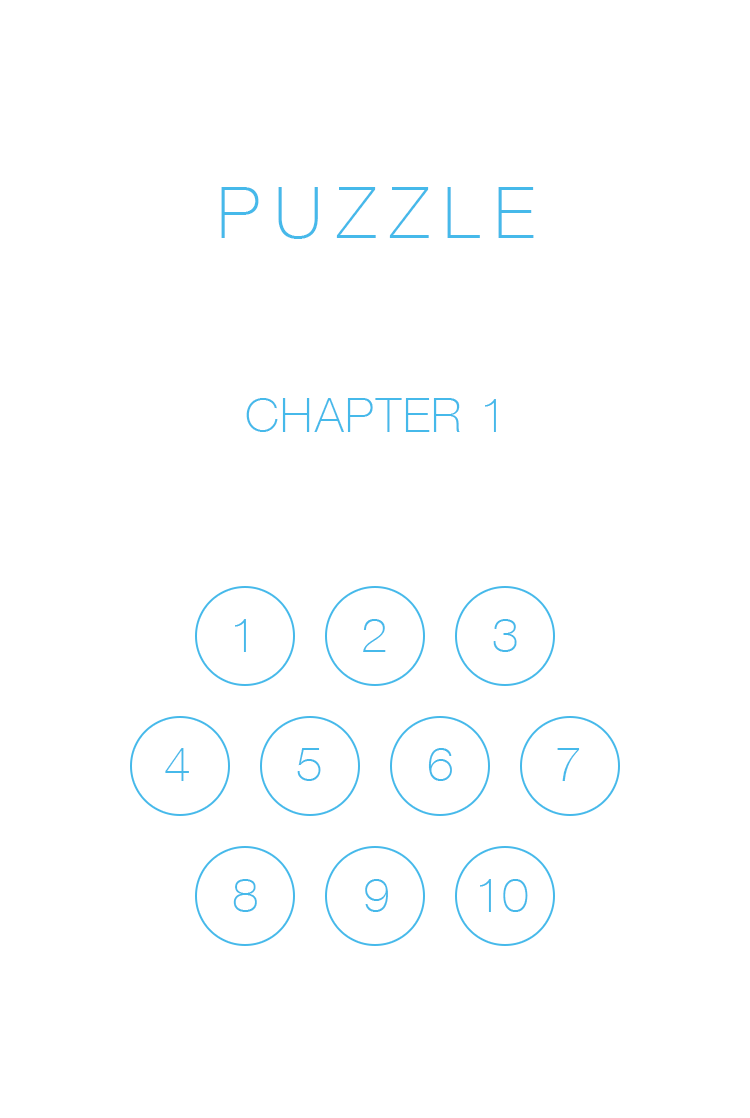
<style>
.page{position:relative;width:750px;height:1118px;background:#ffffff}
.page>*{position:absolute;margin:0}
.t1{font:72px "HelveticaNeue-Thin";letter-spacing:0.2em;color:#46b9ea;text-transform:uppercase}
.t2{font:48px "HelveticaNeue-Thin";letter-spacing:0.05em;color:#46b9ea;text-transform:uppercase}
.t3{font:48px "HelveticaNeue-Thin";color:#46b9ea;text-transform:uppercase}
</style>
<div class="page">
<p class="t1" style="left:221px;top:187px;width:313px;height:52px">Puzzle</p>
<p class="t2" style="left:246px;top:398px;width:250px;height:34px">Chapter 1</p>
<p class="t2" style="left:235px;top:619px;width:11px;height:33px">1</p>
<p class="t2" style="left:363px;top:619px;width:23px;height:33px">2</p>
<p class="t2" style="left:493px;top:619px;width:24px;height:33px">3</p>
<p class="t2" style="left:165px;top:748px;width:24px;height:33px">4</p>
<p class="t2" style="left:297px;top:748px;width:24px;height:33px">5</p>
<p class="t2" style="left:428px;top:748px;width:24px;height:33px">6</p>
<p class="t2" style="left:557px;top:748px;width:23px;height:33px">7</p>
<p class="t2" style="left:233px;top:879px;width:24px;height:33px">8</p>
<p class="t2" style="left:365px;top:879px;width:23px;height:33px">9</p>
<p class="t3" style="left:480px;top:879px;width:48px;height:33px">10</p>
</div>
